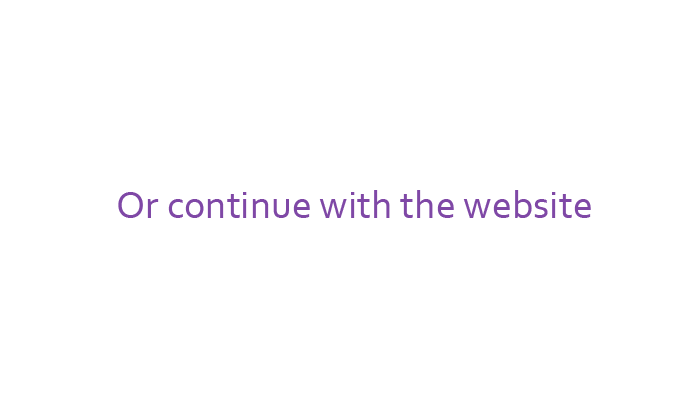
<style>
.page{position:relative;width:700px;height:400px;background:#ffffff}
.page>*{position:absolute;margin:0}
.t1{font:40px "Corbel";color:#7f48a6}
</style>
<div class="page">
<p class="t1" style="left:118px;top:190px;width:473px;height:28px">Or continue with the website</p>
</div>
